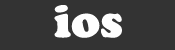
<style>
.page{position:relative;width:175px;height:50px;background:#333333}
.page>*{position:absolute;margin:0}
.t1{font:48px "CooperBlack";color:#fefefe}
</style>
<div class="page">
<p class="t1" style="left:54px;top:5px;width:68px;height:33px">ios</p>
</div>
